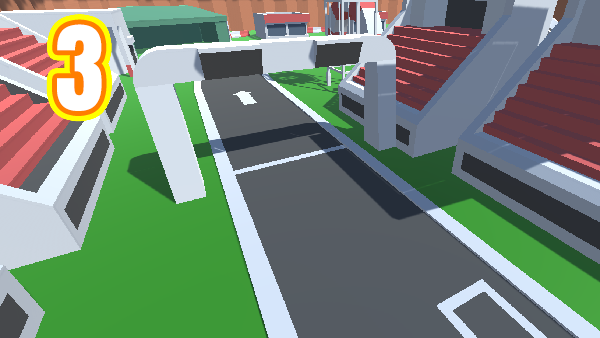
<style>
.page{position:relative;width:600px;height:338px}
.page>*{position:absolute;margin:0}
.t1{font:99.2px "Anton-Regular";letter-spacing:0.005em;color:#ffffff;font-variant:small-caps}
</style>
<div class="page">
<p class="t1" style="left:57px;top:24px;width:45px;height:87px">3</p>
</div>
